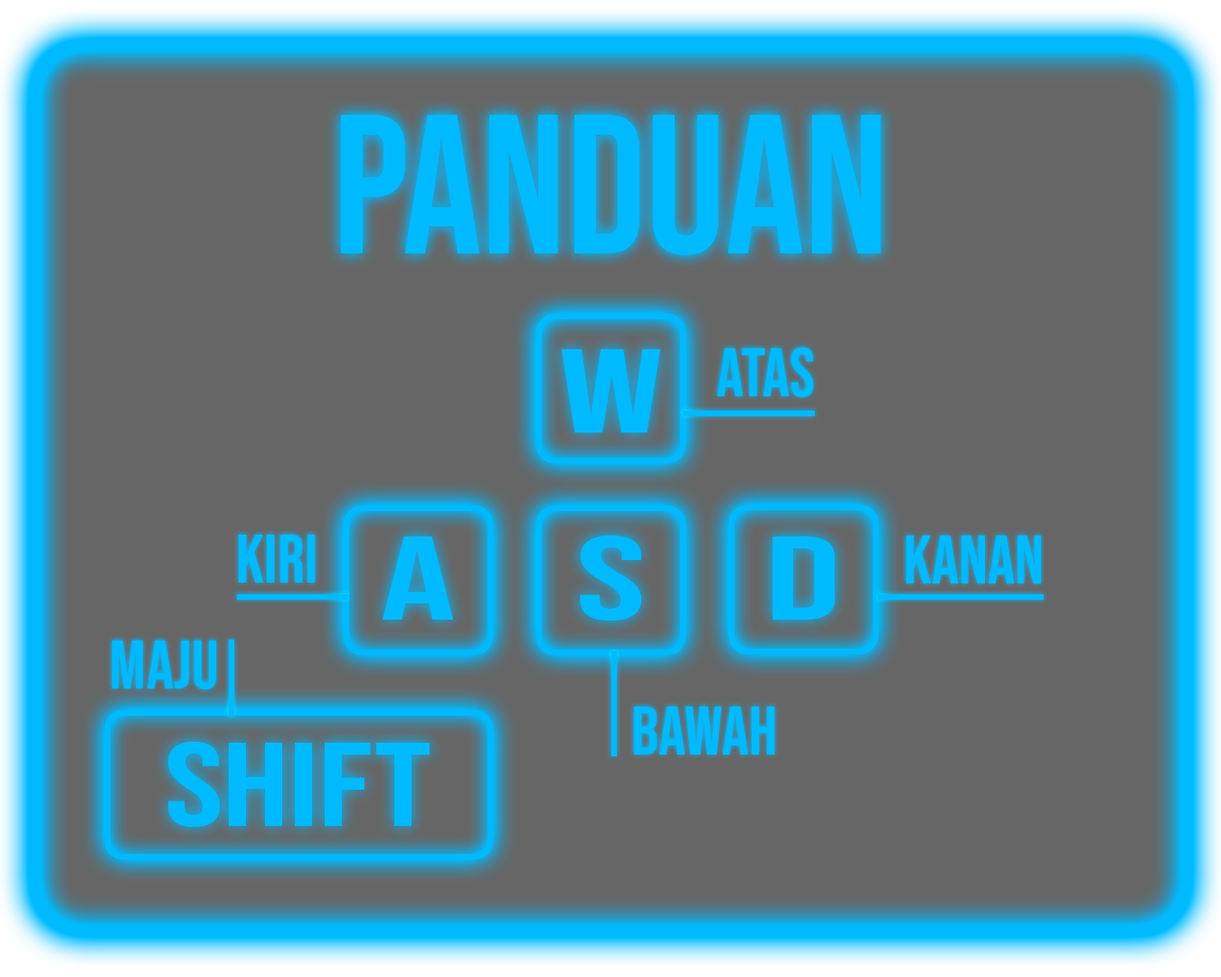
<style>
.page{position:relative;width:1221px;height:977px;background:#666666}
.page>*{position:absolute;margin:0}
.t1{font:197.4px "BebasNeue-Regular";color:#00baff}
.t2{font:118.8px "BebasNeue-Regular";color:#00baff;scale:1.57 1}
.t3{font:67.8px "BebasNeue-Regular";color:#00baff}
.t4{font:118.8px "BebasNeue-Regular";color:#00baff;scale:1.32 1}
</style>
<div class="page">
<p class="t1" style="left:341px;top:115px;width:540px;height:140px">PANDUAN</p>
<p class="t2" style="left:562px;top:349px;width:98px;height:83px">W</p>
<p class="t3" style="left:717px;top:347px;width:97px;height:50px">ATAS</p>
<p class="t3" style="left:239px;top:534px;width:77px;height:48px">KIRI</p>
<p class="t2" style="left:383px;top:536px;width:70px;height:83px">A</p>
<p class="t2" style="left:580px;top:534px;width:61px;height:87px">S</p>
<p class="t2" style="left:772px;top:535px;width:63px;height:85px">D</p>
<p class="t3" style="left:906px;top:535px;width:135px;height:48px">KANAN</p>
<p class="t3" style="left:112px;top:640px;width:104px;height:49px">Maju</p>
<p class="t3" style="left:634px;top:706px;width:141px;height:48px">bawah</p>
<p class="t4" style="left:168px;top:741px;width:262px;height:86px">SHIFT</p>
</div>
